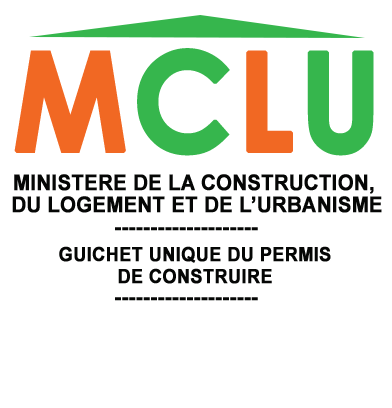
<style>
.page{position:relative;width:392px;height:408px;background:#ffffff}
.page>*{position:absolute;margin:0}
.t1{font:137.2px "CenturyGothic-Bold";letter-spacing:0.02em;color:#f16823;font-weight:bold;scale:0.93 1}
.t2{font:137.2px "CenturyGothic-Bold";letter-spacing:0.02em;color:#36b64d;font-weight:bold;scale:0.93 1}
.t3{font:21.6px/22px "Arial-BoldMT";color:#050605;font-weight:bold;scale:0.93 1}
.t4{font:21.6px "Arial-BoldMT";color:#050605;font-weight:bold;scale:0.93 1}
.t5{font:19.5px/22px "Arial-BoldMT";color:#050605;font-weight:bold;scale:0.93 1}
</style>
<div class="page">
<p class="t1" style="left:14px;top:48px;width:360px;height:108px">M<span class="t2">C</span>L<span class="t2">U</span></p>
<p class="t3" style="left:12px;top:174px;width:370px;height:39px;text-align:center">MINISTERE DE LA CONSTRUCTION, <br>DU LOGEMENT ET DE L’URBANISME</p>
<p class="t4" style="left:115px;top:227px;width:143px;height:4px">--------------------</p>
<p class="t5" style="left:59px;top:246px;width:272px;height:38px;text-align:center">GUICHET UNIQUE DU PERMIS<br>DE CONSTRUIRE</p>
<p class="t4" style="left:115px;top:297px;width:143px;height:4px">--------------------</p>
</div>
